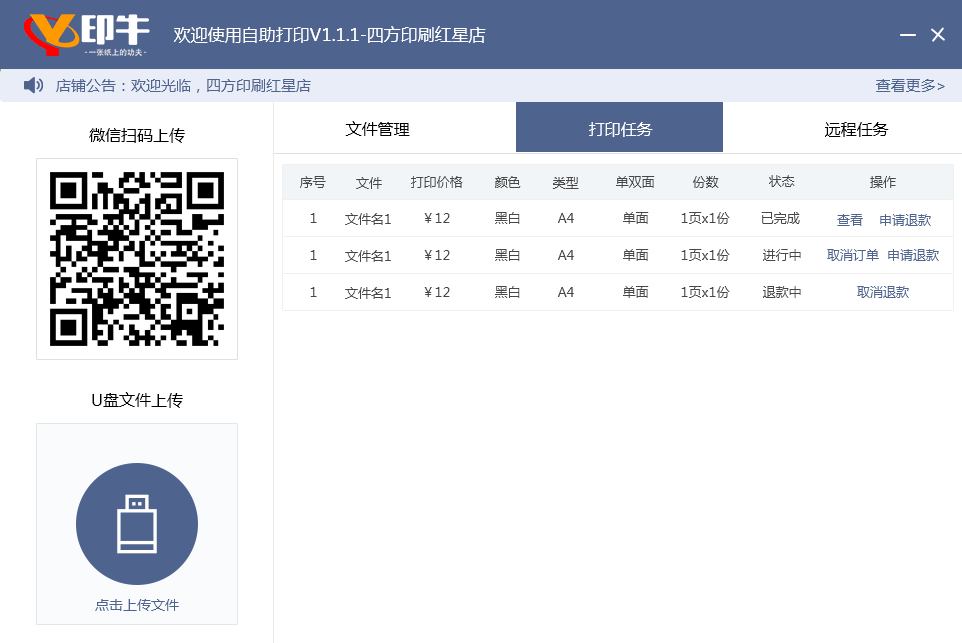
<style>
.page{position:relative;width:962px;height:643px;background:#ffffff}
.page>*{position:absolute;margin:0}
.t1{font:17px "MicrosoftYaHei";color:#ffffff}
.t2{font:15px "MicrosoftYaHei";color:#4f638f}
.t3{font:16px "MicrosoftYaHei";color:#000000}
.t4{font:16px "MicrosoftYaHei";color:#ffffff}
.t5{font:13px "MicrosoftYaHei";color:#474747}
.t6{font:13px "MicrosoftYaHei";color:#4f638f}
.t7{font:14px "MicrosoftYaHei";color:#4f638f}
</style>
<div class="page">
<p class="t1" style="left:174px;top:26px;width:312px;height:17px">欢迎使用自助打印V1.1.1-四方印刷红星店</p>
<p class="t2" style="left:56px;top:79px;width:255px;height:14px">店铺公告：欢迎光临，四方印刷红星店</p>
<p class="t2" style="left:876px;top:79px;width:69px;height:13px">查看更多&gt;</p>
<p class="t3" style="left:345px;top:121px;width:65px;height:15px">文件管理</p>
<p class="t4" style="left:589px;top:122px;width:64px;height:15px">打印任务</p>
<p class="t3" style="left:825px;top:122px;width:64px;height:15px">远程任务</p>
<p class="t3" style="left:89px;top:128px;width:96px;height:15px">微信扫码上传</p>
<p class="t5" style="left:300px;top:176px;width:26px;height:12px">序号</p>
<p class="t5" style="left:356px;top:177px;width:26px;height:12px">文件</p>
<p class="t5" style="left:411px;top:176px;width:52px;height:12px">打印价格</p>
<p class="t5" style="left:495px;top:176px;width:26px;height:12px">颜色</p>
<p class="t5" style="left:552px;top:177px;width:27px;height:12px">类型</p>
<p class="t5" style="left:616px;top:176px;width:39px;height:12px">单双面</p>
<p class="t5" style="left:693px;top:176px;width:26px;height:12px">份数</p>
<p class="t5" style="left:769px;top:175px;width:26px;height:12px">状态</p>
<p class="t5" style="left:870px;top:176px;width:26px;height:12px">操作</p>
<p class="t5" style="left:310px;top:213px;width:7px;height:10px">1</p>
<p class="t5" style="left:345px;top:213px;width:46px;height:12px">文件名1</p>
<p class="t5" style="left:424px;top:213px;width:26px;height:10px">￥12</p>
<p class="t5" style="left:495px;top:212px;width:25px;height:12px">黑白</p>
<p class="t5" style="left:558px;top:213px;width:16px;height:10px">A4</p>
<p class="t5" style="left:623px;top:212px;width:26px;height:12px">单面</p>
<p class="t5" style="left:681px;top:212px;width:49px;height:12px">1页x1份</p>
<p class="t5" style="left:761px;top:212px;width:39px;height:12px">已完成</p>
<p class="t6" style="left:837px;top:214px;width:94px;height:12px">查看    申请退款</p>
<p class="t5" style="left:310px;top:250px;width:7px;height:10px">1</p>
<p class="t5" style="left:345px;top:250px;width:46px;height:12px">文件名1</p>
<p class="t5" style="left:424px;top:250px;width:26px;height:10px">￥12</p>
<p class="t5" style="left:495px;top:249px;width:25px;height:12px">黑白</p>
<p class="t5" style="left:558px;top:250px;width:16px;height:10px">A4</p>
<p class="t5" style="left:623px;top:249px;width:26px;height:12px">单面</p>
<p class="t5" style="left:681px;top:249px;width:49px;height:12px">1页x1份</p>
<p class="t5" style="left:763px;top:249px;width:38px;height:12px">进行中</p>
<p class="t6" style="left:827px;top:249px;width:112px;height:12px">取消订单  申请退款</p>
<p class="t5" style="left:310px;top:287px;width:7px;height:10px">1</p>
<p class="t5" style="left:345px;top:287px;width:46px;height:12px">文件名1</p>
<p class="t5" style="left:424px;top:287px;width:26px;height:10px">￥12</p>
<p class="t5" style="left:495px;top:286px;width:25px;height:12px">黑白</p>
<p class="t5" style="left:558px;top:287px;width:16px;height:10px">A4</p>
<p class="t5" style="left:623px;top:286px;width:26px;height:12px">单面</p>
<p class="t5" style="left:681px;top:286px;width:49px;height:12px">1页x1份</p>
<p class="t5" style="left:763px;top:286px;width:38px;height:12px">退款中</p>
<p class="t6" style="left:857px;top:286px;width:52px;height:12px">取消退款</p>
<p class="t3" style="left:92px;top:392px;width:91px;height:16px">U盘文件上传</p>
<p class="t7" style="left:95px;top:599px;width:84px;height:12px">点击上传文件</p>
</div>
